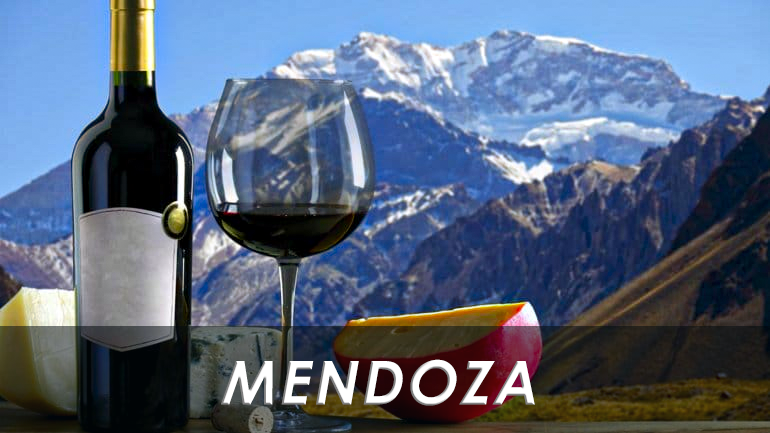
<style>
.page{position:relative;width:770px;height:433px}
.page>*{position:absolute;margin:0}
.t1{font:60.4px "CenturyGothic-Bold";letter-spacing:0.05em;color:#ffffff;font-style:italic}
.t2{font:44.6px "CenturyGothic-Bold";letter-spacing:0.05em;color:#ffffff;font-style:italic}
</style>
<div class="page">
<p class="t1" style="left:221px;top:359px;width:314px;height:47px"><span class="t2"> </span>MENDOZA</p>
</div>
